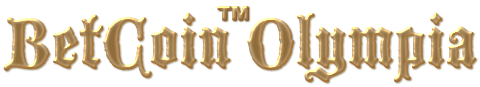
<style>
.page{position:relative;width:480px;height:87px;background:#ffffff}
.page>*{position:absolute;margin:0}
.t1{font:19.2px "Arial-Black"}
.t2{font:17.3px "Silom"}
.t3{font:76.8px "BlackmoorLetPlain"}
</style>
<div class="page">
<p class="t1" style="left:217px;top:6px;width:32px;height:15px"><span class="t2">    </span> TM</p>
<p class="t1" style="left:217px;top:6px;width:32px;height:15px"><span class="t2">    </span> TM</p>
<p class="t3" style="left:3px;top:12px;width:473px;height:71px"><span class="t2">     </span>BetCoin Olympia</p>
</div>
